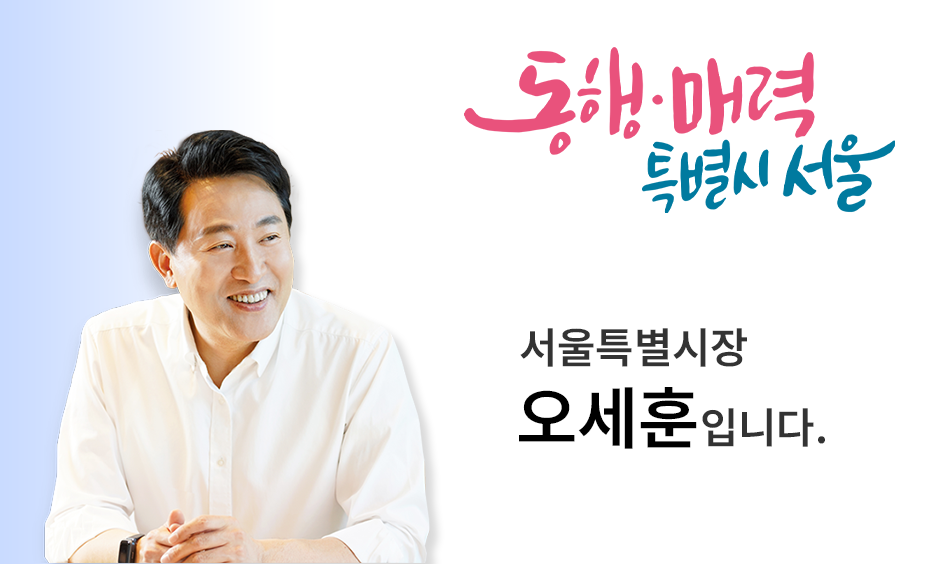
<style>
.page{position:relative;width:927px;height:564px;background:#ffffff}
.page>*{position:absolute;margin:0}
.t1{font:41.7px "NotoSansKR-SemiBold";color:#333333}
.t2{font:66.7px "NotoSansKR-SemiBold";color:#000000}
</style>
<div class="page">
<p class="t1" style="left:520px;top:328px;width:227px;height:39px">서울특별시장</p>
<p class="t1" style="left:519px;top:387px;width:306px;height:62px"><span class="t2">오세훈</span>입니다.</p>
</div>
